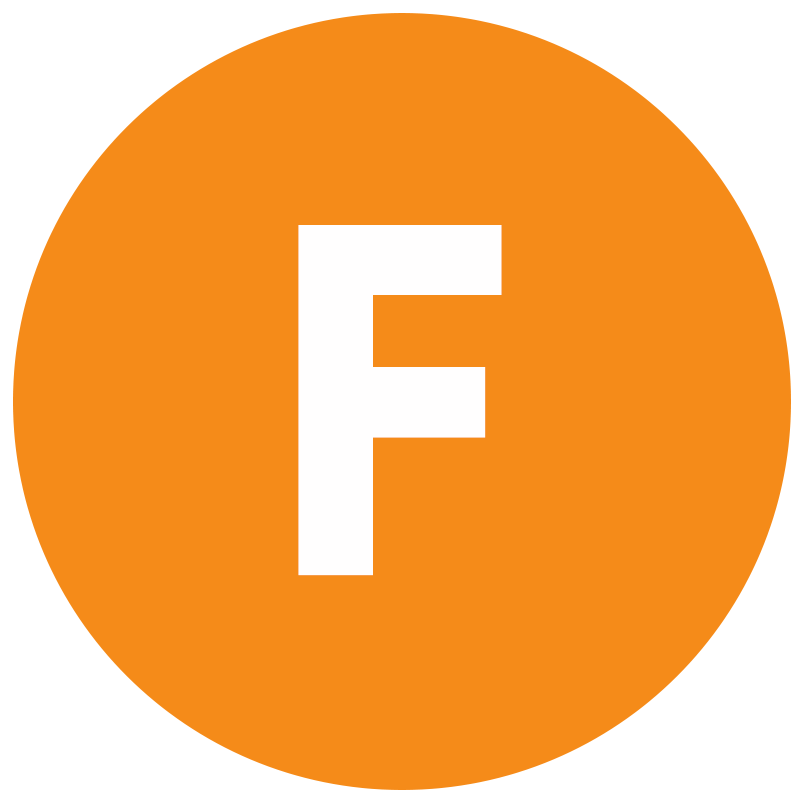
<style>
.page{position:relative;width:800px;height:800px;background:#f58b19}
.page>*{position:absolute;margin:0}
.t1{font:493.2px "Pangram-ExtraBold";letter-spacing:0.05em;color:#fffefe}
</style>
<div class="page">
<p class="t1" style="left:298px;top:225px;width:204px;height:351px">F</p>
</div>
